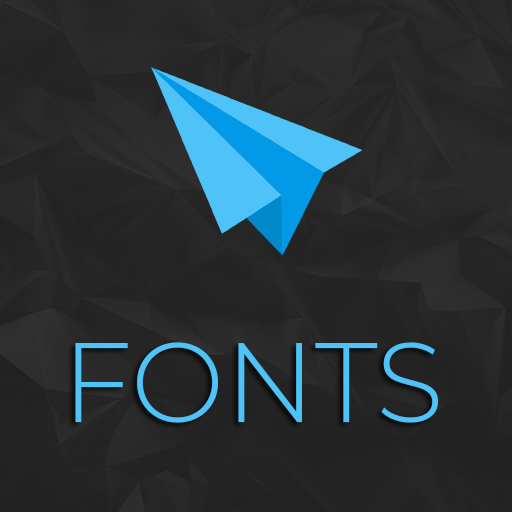
<style>
.page{position:relative;width:512px;height:512px}
.page>*{position:absolute;margin:0}
.t1{font:111.1px "Montserrat-Light";color:#4fc2f8}
</style>
<div class="page">
<p class="t1" style="left:75px;top:342px;width:363px;height:81px">FONTS</p>
</div>
